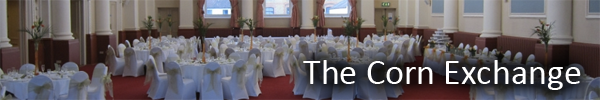
<style>
.page{position:relative;width:600px;height:100px}
.page>*{position:absolute;margin:0}
.t1{font:36px "Calibri";color:#ffffff}
</style>
<div class="page">
<p class="t1" style="left:303px;top:60px;width:278px;height:30px">The Corn Exchange</p>
</div>
